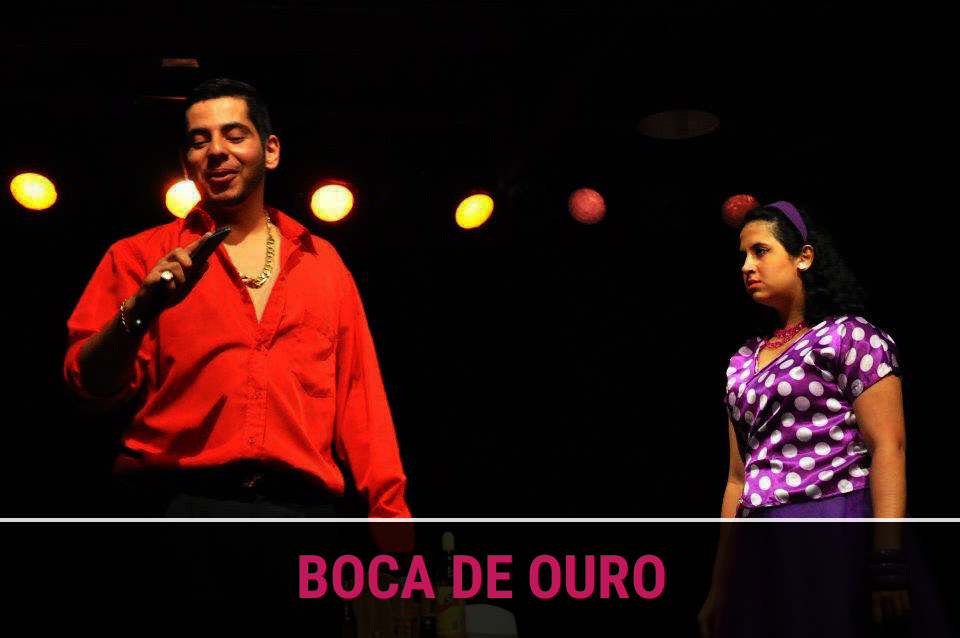
<style>
.page{position:relative;width:960px;height:638px;background:#010101}
.page>*{position:absolute;margin:0}
.t1{font:60px "RobotoCondensed-Bold";color:#c2185b}
</style>
<div class="page">
<p class="t1" style="left:299px;top:554px;width:366px;height:45px">BOCA DE OURO</p>
</div>
